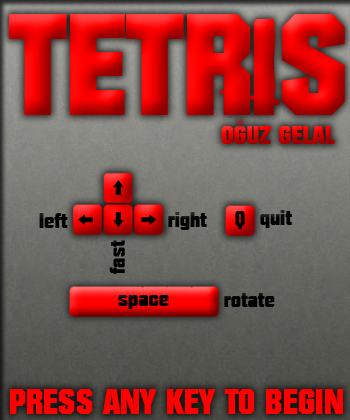
<style>
.page{position:relative;width:350px;height:420px}
.page>*{position:absolute;margin:0}
.t1{font:140px "Autumn"}
.t2{font:140px "60sekuntia"}
.t3{font:25.3px "Autumn"}
.t4{font:25.3px "MyriadPro-Regular";color:#ff0000}
.t5{font:20.9px "Autumn";color:#000000}
.t6{font:34.2px "Autumn";color:#ff0000}
</style>
<div class="page">
<p class="t1" style="left:9px;top:14px;width:336px;height:101px">TETR<span class="t2">ı</span>S</p>
<p class="t3" style="left:221px;top:126px;width:114px;height:18px">OGUZ GELAL</p>
<p class="t4" style="left:236px;top:121px;width:7px;height:2px">-</p>
<p class="t5" style="left:39px;top:213px;width:29px;height:15px">left</p>
<p class="t5" style="left:168px;top:212px;width:39px;height:18px">right</p>
<p class="t5" style="left:235px;top:211px;width:10px;height:18px">Q</p>
<p class="t5" style="left:260px;top:210px;width:32px;height:18px">quit</p>
<p class="t5" style="left:109px;top:240px;width:16px;height:34px;rotate:-90deg">fast</p>
<p class="t5" style="left:224px;top:293px;width:51px;height:14px">rotate</p>
<p class="t5" style="left:118px;top:295px;width:51px;height:14px">space</p>
<p class="t6" style="left:10px;top:389px;width:333px;height:25px">PRESS ANY KEY TO BEGIN</p>
</div>
